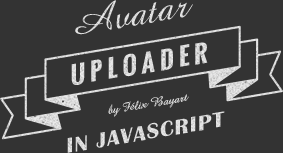
<style>
.page{position:relative;width:283px;height:153px;background:#333333}
.page>*{position:absolute;margin:0}
.t1{font:40.6px "AmazoneBT-Regular";color:#dedede}
.t2{font:24.3px "Oswald-Bold";letter-spacing:0.2em;color:#dbdbdb}
.t3{font:12.7px "AmazoneBT-Regular";color:#d8d8d8}
.t4{font:22.1px "BritannicBold";letter-spacing:0.05em;color:#dcdcdc}
</style>
<div class="page">
<p class="t1" style="left:75px;top:0px;width:118px;height:35px;rotate:-10deg">Avatar</p>
<p class="t2" style="left:71px;top:42px;width:137px;height:43px;rotate:-10deg">UPLOADER</p>
<p class="t3" style="left:108px;top:94px;width:81px;height:23px;rotate:-10deg">by Félix Bayart</p>
<p class="t4" style="left:67px;top:111px;width:158px;height:42px;rotate:-10deg">IN JAVASCRIPT</p>
</div>
